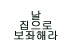
<style>
.page{position:relative;width:72px;height:50px;background:#ffffff}
.page>*{position:absolute;margin:0}
.t1{font:11px/10px "Gulim";color:#011605;font-weight:bold}
</style>
<div class="page">
<p class="t1" style="left:14px;top:10px;width:44px;height:30px;text-align:center">날 집으로 보좌해라</p>
</div>
